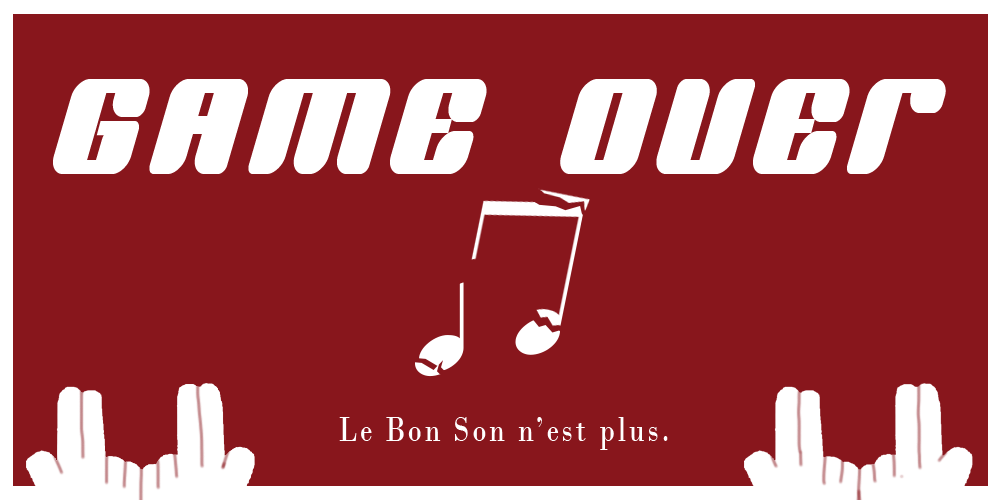
<style>
.page{position:relative;width:1000px;height:500px;background:#88161c}
.page>*{position:absolute;margin:0}
.t1{font:180px "BNJinx";letter-spacing:0.1em;color:#ffffff;scale:0.8 1}
.t2{font:36px "BodoniMT";letter-spacing:0.1em;color:#ffffff;scale:0.8 1}
</style>
<div class="page">
<p class="t1" style="left:53px;top:79px;width:893px;height:95px">GAME OVER</p>
<p class="t2" style="left:339px;top:417px;width:329px;height:33px">Le Bon Son n’est plus.</p>
</div>
